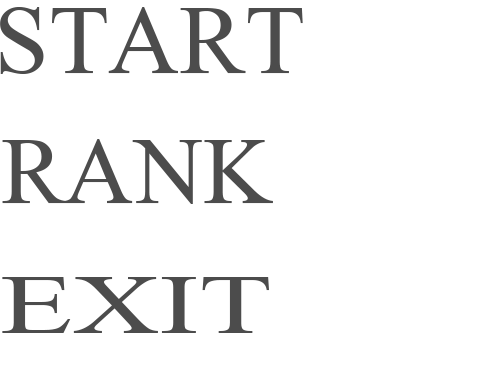
<style>
.page{position:relative;width:500px;height:390px;background:#ffffff}
.page>*{position:absolute;margin:0}
.t1{font:148.8px "AngsanaNew";color:#4c4c4c}
.t2{font:145.2px "AngsanaNew";color:#4c4c4c}
.t3{font:127.4px "AngsanaNew";color:#4c4c4c;scale:1.42 1}
</style>
<div class="page">
<p class="t1" style="left:0px;top:7px;width:303px;height:67px">START</p>
<p class="t2" style="left:2px;top:139px;width:271px;height:65px">RANK</p>
<p class="t3" style="left:2px;top:277px;width:267px;height:56px">EXIT</p>
</div>
